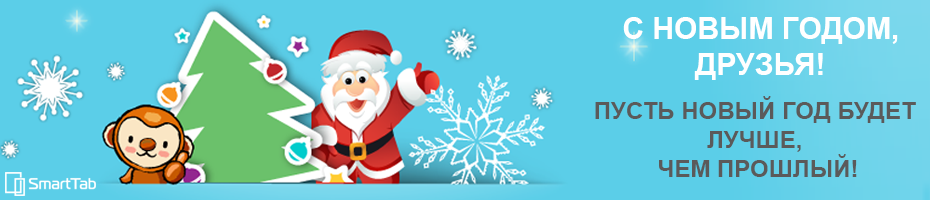
<style>
.page{position:relative;width:930px;height:200px;background:#5bcee8}
.page>*{position:absolute;margin:0}
.t1{font:30px "Arial-BoldMT";color:#ffffff}
.t2{font:24px "Arial-BoldMT";color:#5b5a5a}
</style>
<div class="page">
<p class="t1" style="left:623px;top:17px;width:275px;height:63px;text-align:center">С НОВЫМ ГОДОМ, <br>ДРУЗЬЯ!</p>
<p class="t2" style="left:595px;top:96px;width:321px;height:81px;text-align:center">ПУСТЬ НОВЫЙ ГОД БУДЕТ <br>ЛУЧШЕ, <br>ЧЕМ ПРОШЛЫЙ!</p>
</div>
